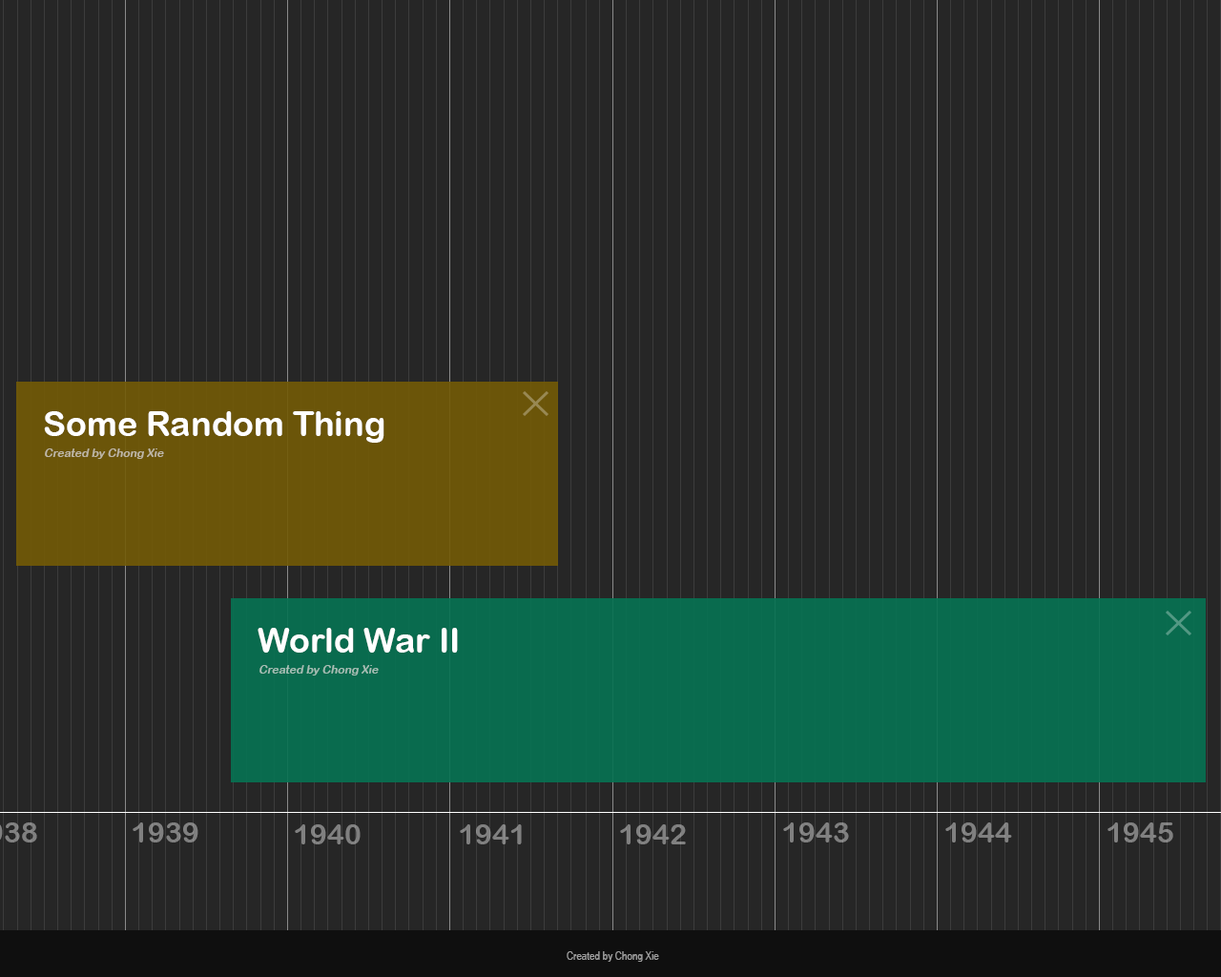
<style>
.page{position:relative;width:1221px;height:977px;background:#262626}
.page>*{position:absolute;margin:0}
.t1{font:34.3px "ArialRoundedMTBold";color:#ffffff}
.t2{font:11.4px "ArialRoundedMTBold";color:#beb7a5;font-style:italic}
.t3{font:11.4px "ArialRoundedMTBold";color:#a5beb5;font-style:italic}
.t4{font:28.6px "ArialRoundedMTBold";color:#808080}
.t5{font:11.4px "ArialNarrow";color:#9f9f9f}
</style>
<div class="page">
<p class="t1" style="left:44px;top:411px;width:340px;height:32px">Some Random Thing</p>
<p class="t2" style="left:45px;top:448px;width:119px;height:11px">Created by Chong Xie</p>
<p class="t1" style="left:258px;top:628px;width:200px;height:24px">World War II</p>
<p class="t3" style="left:259px;top:665px;width:120px;height:10px">Created by Chong Xie</p>
<p class="t4" style="left:133px;top:822px;width:65px;height:20px">1939</p>
<p class="t4" style="left:295px;top:824px;width:66px;height:20px">1940</p>
<p class="t4" style="left:460px;top:824px;width:62px;height:20px">1941</p>
<p class="t4" style="left:620px;top:824px;width:66px;height:20px">1942</p>
<p class="t4" style="left:783px;top:822px;width:66px;height:20px">1943</p>
<p class="t4" style="left:945px;top:822px;width:67px;height:20px">1944</p>
<p class="t4" style="left:1107px;top:822px;width:66px;height:20px">1945</p>
<p class="t5" style="left:567px;top:951px;width:92px;height:10px">Created by Chong Xie</p>
</div>
